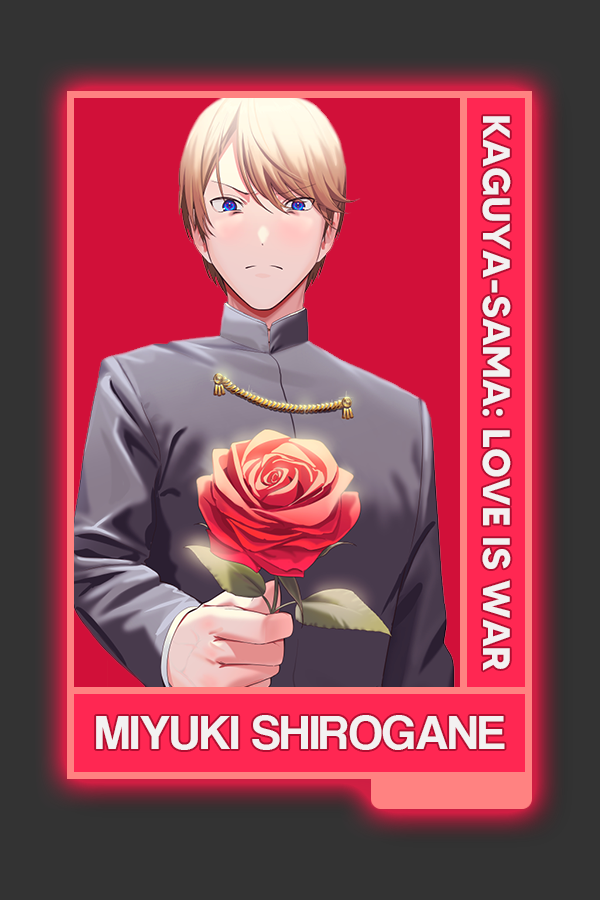
<style>
.page{position:relative;width:600px;height:900px;background:#333333}
.page>*{position:absolute;margin:0}
.t1{font:38.3px "MADETOMMY-Bold";color:#f5f5f5}
.t2{font:50.5px "CoolveticaRg-Regular";color:#f5f5f5}
</style>
<div class="page">
<p class="t1" style="left:482px;top:116px;width:29px;height:555px;rotate:90deg">KAGUYA-SAMA: LOVE IS WAR</p>
<p class="t2" style="left:96px;top:715px;width:409px;height:35px">MIYUKI SHIROGANE</p>
</div>
